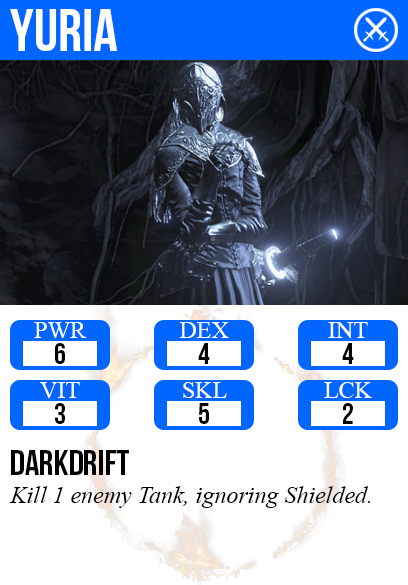
<style>
.page{position:relative;width:408px;height:585px;background:#ffffff}
.page>*{position:absolute;margin:0}
.t1{font:60px "BebasNeue";color:#ffffff}
.t2{font:24px "TimesNewRomanPSMT";color:#ffffff}
.t3{font:30px "BebasNeue";color:#000000}
.t4{font:36px "BebasNeue";color:#000000}
.t5{font:24px "TimesNewRomanPS-ItalicMT";color:#000000}
</style>
<div class="page">
<p class="t1" style="left:10px;top:9px;width:107px;height:42px">yuria</p>
<p class="t2" style="left:34px;top:322px;width:53px;height:16px">PWR</p>
<p class="t2" style="left:179px;top:322px;width:50px;height:16px">DEX</p>
<p class="t2" style="left:328px;top:322px;width:40px;height:17px">INT</p>
<p class="t3" style="left:55px;top:343px;width:10px;height:21px">6</p>
<p class="t3" style="left:198px;top:343px;width:12px;height:21px">4</p>
<p class="t3" style="left:342px;top:343px;width:12px;height:21px">4</p>
<p class="t2" style="left:40px;top:382px;width:40px;height:16px">VIT</p>
<p class="t2" style="left:183px;top:382px;width:44px;height:16px">SKL</p>
<p class="t2" style="left:324px;top:382px;width:48px;height:16px">LCK</p>
<p class="t3" style="left:55px;top:403px;width:10px;height:21px">3</p>
<p class="t3" style="left:199px;top:403px;width:10px;height:21px">5</p>
<p class="t3" style="left:343px;top:403px;width:10px;height:21px">2</p>
<p class="t4" style="left:11px;top:450px;width:118px;height:25px">darkdrift</p>
<p class="t5" style="left:9px;top:486px;width:362px;height:22px">Kill 1 enemy Tank, ignoring Shielded.</p>
</div>
